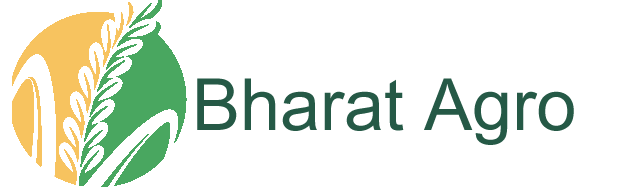
<style>
.page{position:relative;width:626px;height:189px;background:#ffffff}
.page>*{position:absolute;margin:0}
.t1{font:72px "ArialUnicodeMS";color:#255946}
</style>
<div class="page">
<p class="t1" style="left:197px;top:78px;width:377px;height:67px">Bharat Agro</p>
</div>
